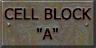
<style>
.page{position:relative;width:96px;height:48px}
.page>*{position:absolute;margin:0}
.t1{font:15.2px/20px "Tahoma";color:#080000;text-transform:uppercase;font-weight:bold}
</style>
<div class="page">
<p class="t1" style="left:4px;top:7px;width:88px;height:33px;text-align:center">CELL BLOCK<br>"A"</p>
</div>
